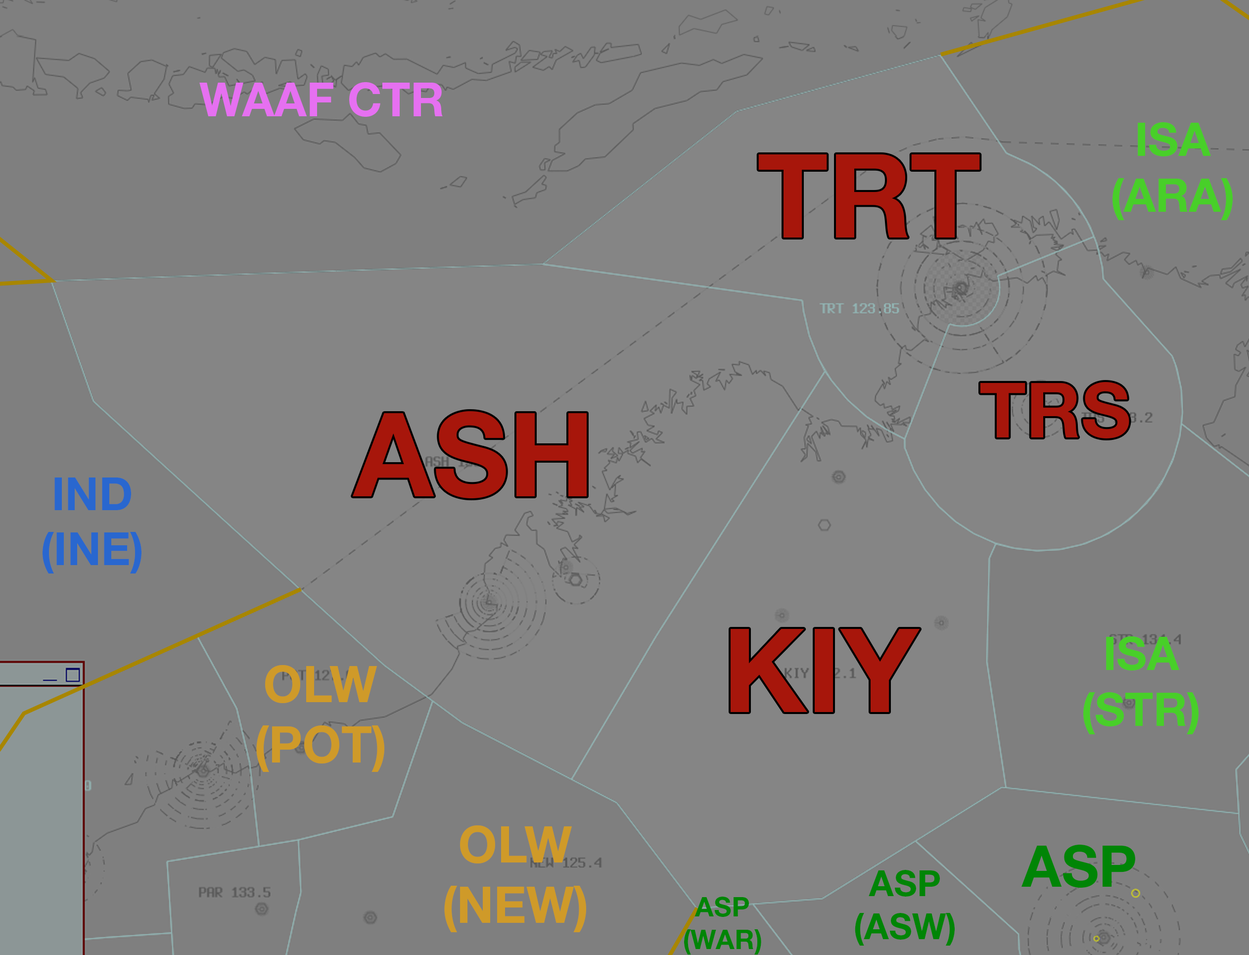
<style>
.page{position:relative;width:1249px;height:955px;background:#7f7f7f}
.page>*{position:absolute;margin:0}
.t1{font:46.8px "HelveticaNeueLTStd-Bd";color:#e670f1}
.t2{font:46.7px "HelveticaNeueLTStd-Bd";color:#48cf29}
.t3{font:116.2px "HelveticaNeueLTStd-Bd";color:#a7160b}
.t4{font:76.5px "HelveticaNeueLTStd-Bd";color:#a7160b}
.t5{font:45.7px "HelveticaNeueLTStd-Bd";color:#2967cf}
.t6{font:50.3px "HelveticaNeueLTStd-Bd";color:#cf9a29}
.t7{font:57.5px "HelveticaNeueLTStd-Bd";color:#008506}
.t8{font:36px "HelveticaNeueLTStd-Bd";color:#008506}
.t9{font:27.2px "HelveticaNeueLTStd-Bd";color:#008506}
</style>
<div class="page">
<p class="t1" style="left:199px;top:82px;width:244px;height:35px">WAAF CTR</p>
<p class="t2" style="left:1112px;top:122px;width:121px;height:98px;text-align:center">ISA<br>(ARA)</p>
<p class="t3" style="left:758px;top:154px;width:222px;height:83px">TRT</p>
<p class="t4" style="left:980px;top:382px;width:149px;height:56px">TRS</p>
<p class="t3" style="left:353px;top:411px;width:234px;height:88px">ASH</p>
<p class="t5" style="left:43px;top:477px;width:98px;height:96px;text-align:center">IND<br>(INE)</p>
<p class="t3" style="left:731px;top:629px;width:189px;height:83px">KIY</p>
<p class="t2" style="left:1083px;top:636px;width:116px;height:98px;text-align:center">ISA<br>(STR)</p>
<p class="t6" style="left:256px;top:664px;width:128px;height:108px;text-align:center">OLW<br>(POT)</p>
<p class="t6" style="left:444px;top:825px;width:142px;height:107px;text-align:center">OLW<br>(NEW)</p>
<p class="t7" style="left:1021px;top:844px;width:114px;height:43px">ASP</p>
<p class="t8" style="left:855px;top:870px;width:100px;height:75px;text-align:center">ASP<br>(ASW)</p>
<p class="t9" style="left:684px;top:896px;width:77px;height:58px;text-align:center">ASP<br>(WAR)</p>
</div>
